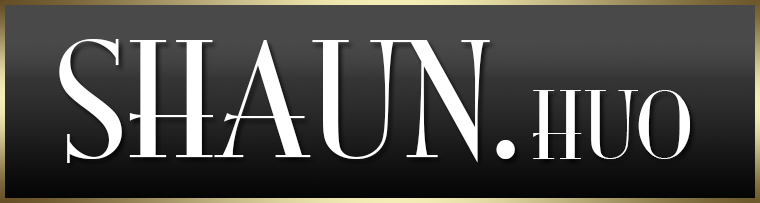
<style>
.page{position:relative;width:760px;height:203px}
.page>*{position:absolute;margin:0}
.t1{font:147.6px "MonaLisaSolidITCTT";color:#ffffff}
.t2{font:85.2px "MonaLisaSolidITCTT";color:#ffffff}
</style>
<div class="page">
<p class="t1" style="left:59px;top:39px;width:456px;height:124px">SHAUN.</p>
<p class="t2" style="left:533px;top:90px;width:157px;height:69px">HUO</p>
</div>
